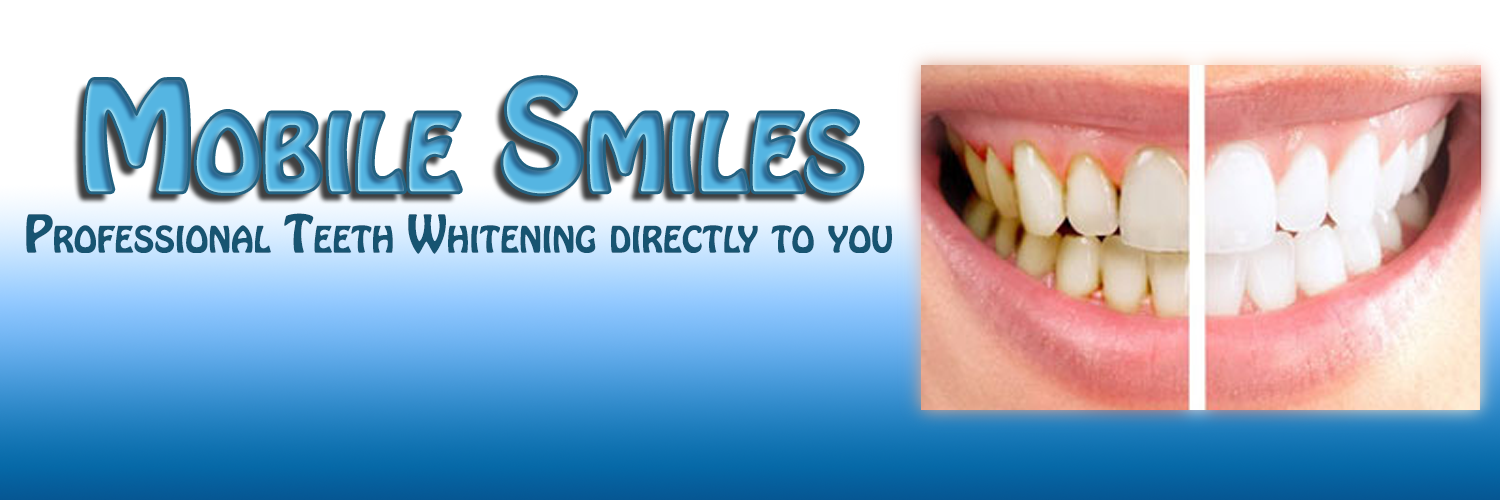
<style>
.page{position:relative;width:1500px;height:500px}
.page>*{position:absolute;margin:0}
.t1{font:133.3px "HoboStd";font-variant:small-caps}
.t2{font:45.8px "HoboStd";color:#175471;font-variant:small-caps}
</style>
<div class="page">
<p class="t1" style="left:85px;top:78px;width:777px;height:116px">Mobile Smiles</p>
<p class="t2" style="left:26px;top:213px;width:866px;height:41px">Professional Teeth Whitening directly to you</p>
</div>
